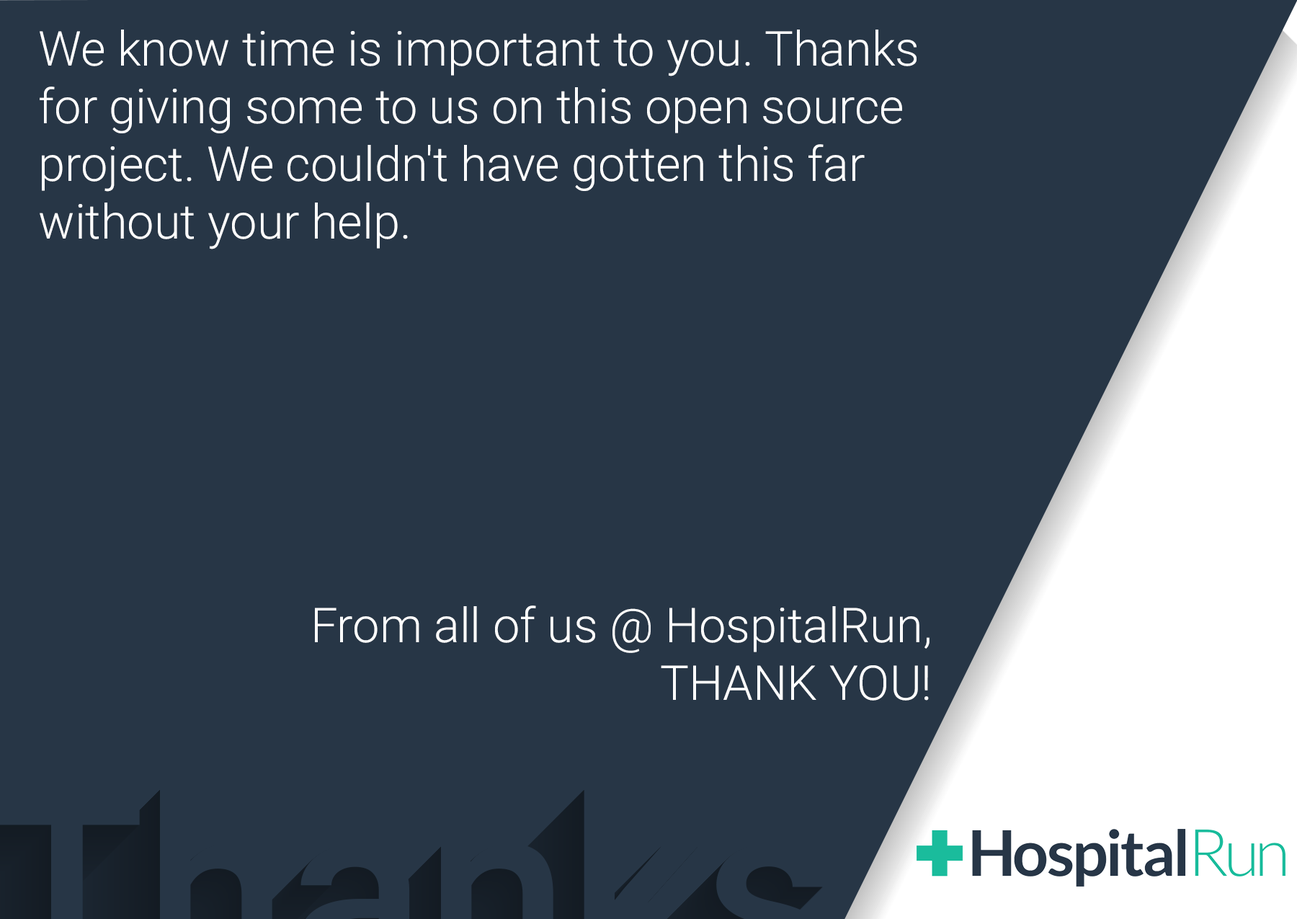
<style>
.page{position:relative;width:1297px;height:919px;background:#273646}
.page>*{position:absolute;margin:0}
.t1{font:48.1px "Roboto-Light";color:#ffffff}
</style>
<div class="page">
<p class="t1" style="left:40px;top:30px;width:890px;height:671px">We know time is important to you. Thanks for giving some to us on this open source project. We couldn't have gotten this far without your help. <br><br><br><br><br><br><br>From all of us @ HospitalRun,<br> THANK YOU!</p>
</div>
